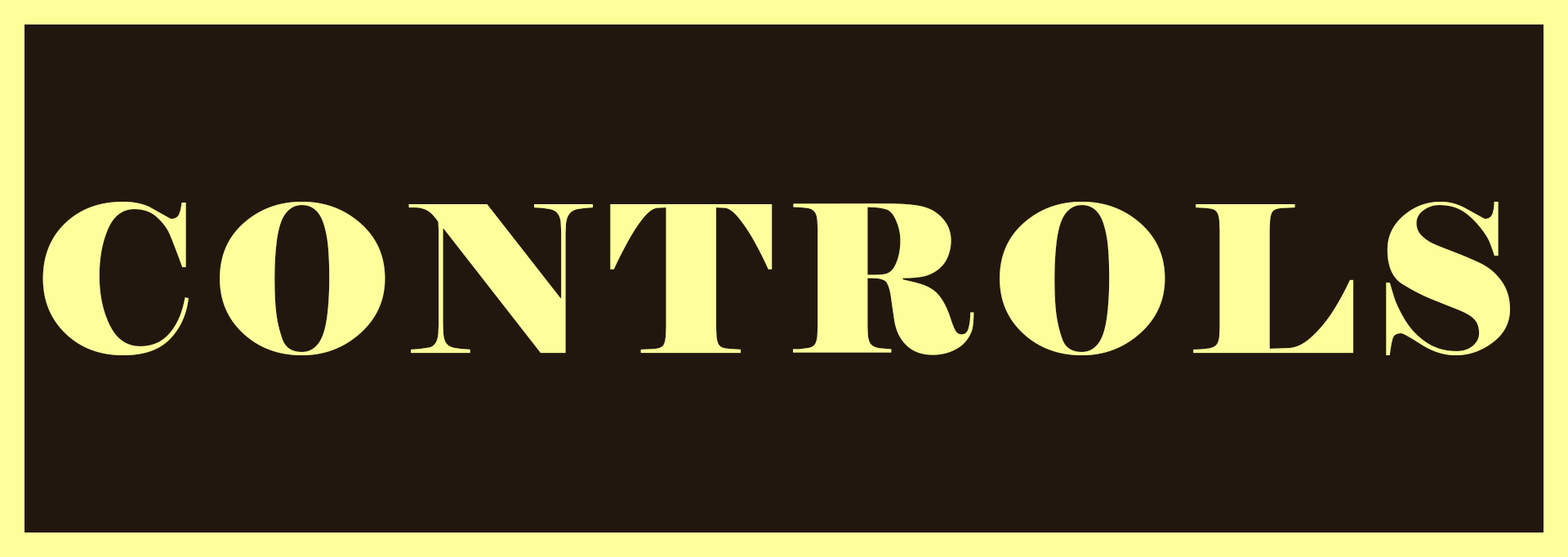
<style>
.page{position:relative;width:1568px;height:557px;background:#22170e}
.page>*{position:absolute;margin:0}
.t1{font:204.2px "Elephant-Regular";letter-spacing:0.075em;color:#feff9b}
</style>
<div class="page">
<p class="t1" style="left:42px;top:202px;width:1468px;height:153px">CONTROLS</p>
</div>
